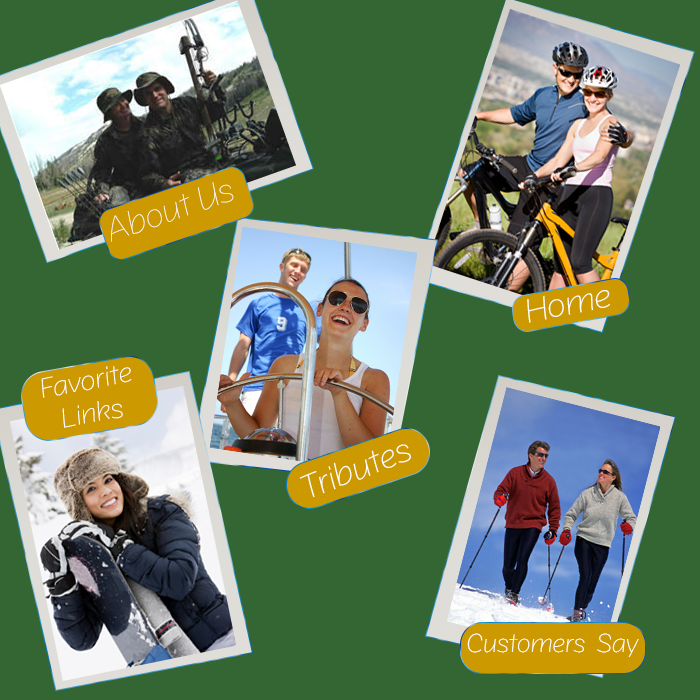
<style>
.page{position:relative;width:700px;height:700px;background:#336633}
.page>*{position:absolute;margin:0}
.t1{font:33.3px "BisbeeVFWght-Hair";color:#ffffff}
.t2{font:33.3px "BisbeeVFWght-Thin";color:#ffffff}
.t3{font:27.4px "BisbeeVFWght-Thin";color:#ffffff}
.t4{font:25px "BisbeeVFWght-Thin";color:#ffffff}
.t5{font:32.9px "BisbeeVFWght-Thin";color:#ffffff}
</style>
<div class="page">
<p class="t1" style="left:111px;top:182px;width:123px;height:60px;rotate:-19deg">About Us</p>
<p class="t2" style="left:527px;top:290px;width:83px;height:33px;rotate:-11deg">Home</p>
<p class="t3" style="left:41px;top:366px;width:91px;height:62px;rotate:-11deg">Favorite Links</p>
<p class="t2" style="left:299px;top:444px;width:112px;height:53px;rotate:-21deg">Tributes</p>
<p class="t4" style="left:467px;top:633px;width:172px;height:24px;text-align:center">Customers  Say<br><span class="t5">Say</span></p>
</div>
